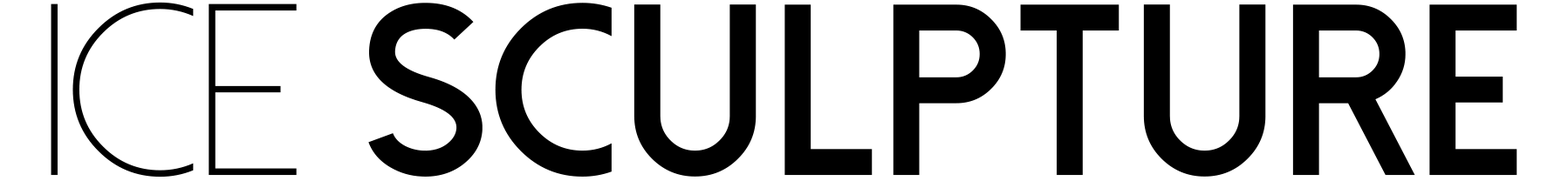
<style>
.page{position:relative;width:1568px;height:181px;background:#ffffff}
.page>*{position:absolute;margin:0}
.t1{font:244.3px "DolceVitaHeavy-Bold";color:#000000}
.t2{font:244.3px "DolceVitaLight";color:#000000}
</style>
<div class="page">
<p class="t1" style="left:51px;top:2px;width:1466px;height:176px"><span class="t2">ICE </span>SCULPTURE</p>
</div>
